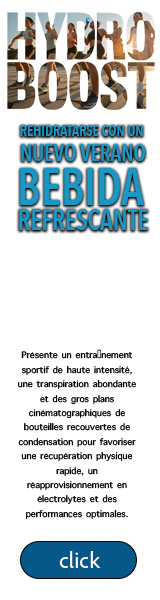
<style>
.page{position:relative;width:160px;height:600px;background:#ffffff}
.page>*{position:absolute;margin:0}
.t1{font:16px/25.5px "AvenirNextCondensed-DemiBold";color:#1a97c5;scale:0.87 1}
.t2{font:24px/25.5px "AvenirNextCondensed-DemiBold";color:#1a97c5;scale:0.87 1}
.t3{font:52px/44px "AvenirNextCondensed-DemiBold";color:#1a97c5;scale:0.87 1}
.t4{font:29.1px/25.5px "AvenirNextCondensed-DemiBold";color:#1a97c5;scale:0.87 1}
.t5{font:12px "AppleSymbols";color:#000000}
.t6{font:22.6px "AdobeCleanUX-Regular";color:#ffffff}
</style>
<div class="page">
<p class="t1" style="left:19px;top:125px;width:129px;height:105px;text-align:center">REHIDRATARSE CON UN <br><span class="t2">NUEVO VERANO<br></span><span class="t3">BEBIDA</span><span class="t4"> <br>REFRESCANTE</span></p>
<p class="t5" style="left:18px;top:349px;width:118px;height:170px;text-align:center">Présente un entraînement sportif de haute intensité, une transpiration abondante et des gros plans cinématographiques de bouteilles recouvertes de condensation pour favoriser une récupération physique rapide, un réapprovisionnement en électrolytes et des performances optimales.</p>
<p class="t6" style="left:59px;top:551px;width:42px;height:17px">click</p>
</div>
